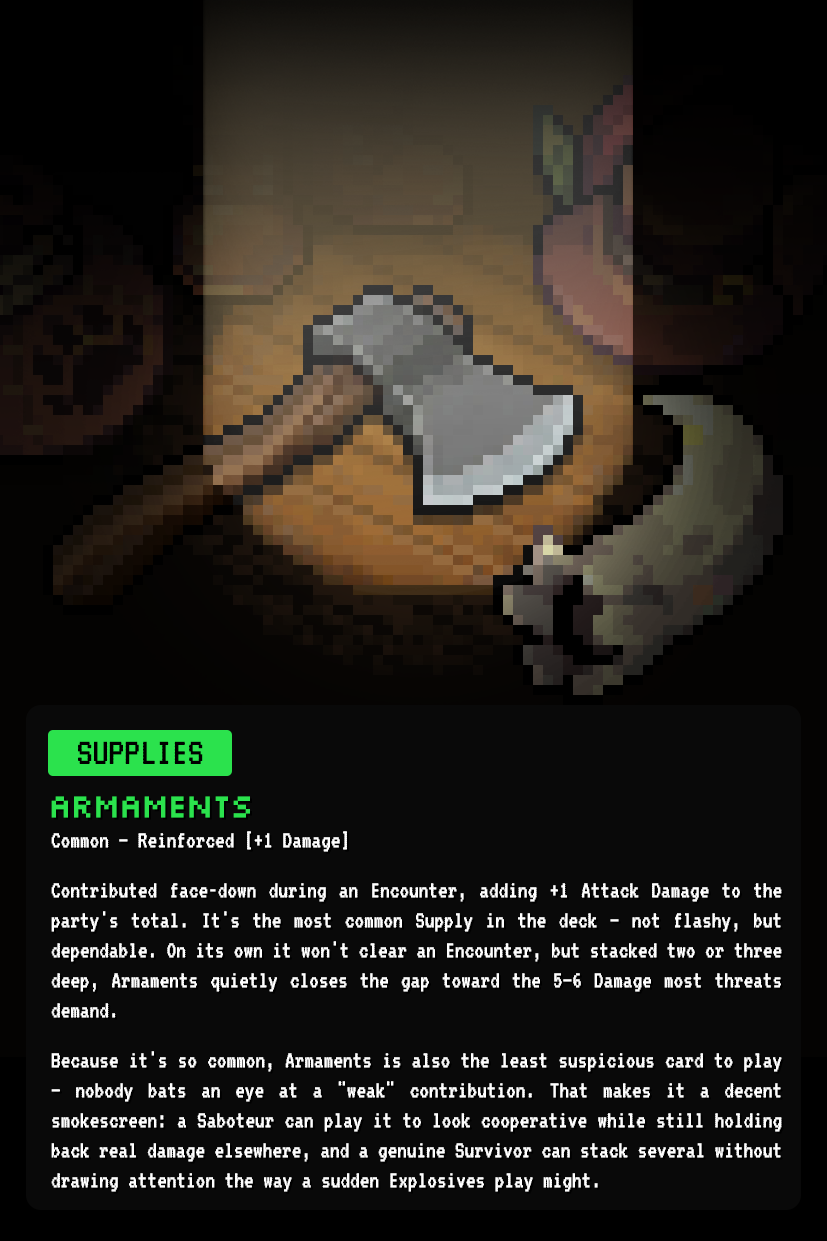
<style>
.page{position:relative;width:827px;height:1241px;background:#090909}
.page>*{position:absolute;margin:0}
.t1{font:39.7px "VT323-Regular";color:#000000}
.t2{font:25px "VT323-Regular";color:#ffffff;scale:0.96 1}
.t3{font:33.3px "Silkscreen-Regular";letter-spacing:-0.05em;color:#2be24d;scale:0.96 1}
</style>
<div class="page">
<p class="t1" style="left:78px;top:741px;width:125px;height:23px">SUPPLIES</p>
<p class="t2" style="left:51px;top:796px;width:731px;height:396px;text-align:justify"><span class="t3">ARMAMENTS<br></span>Common — Reinforced [+1 Damage]<br><br>Contributed face-down during an Encounter, adding +1 Attack Damage to the party's total. It's the most common Supply in the deck — not flashy, but dependable. On its own it won't clear an Encounter, but stacked two or three deep, Armaments quietly closes the gap toward the 5–6 Damage most threats demand.<br><br>Because it's so common, Armaments is also the least suspicious card to play — nobody bats an eye at a "weak" contribution. That makes it a decent smokescreen: a Saboteur can play it to look cooperative while still holding back real damage elsewhere, and a genuine Survivor can stack several without drawing attention the way a sudden Explosives play might.<br><br>"Not much. But it's something, and something's better than nothing out here."</p>
</div>
